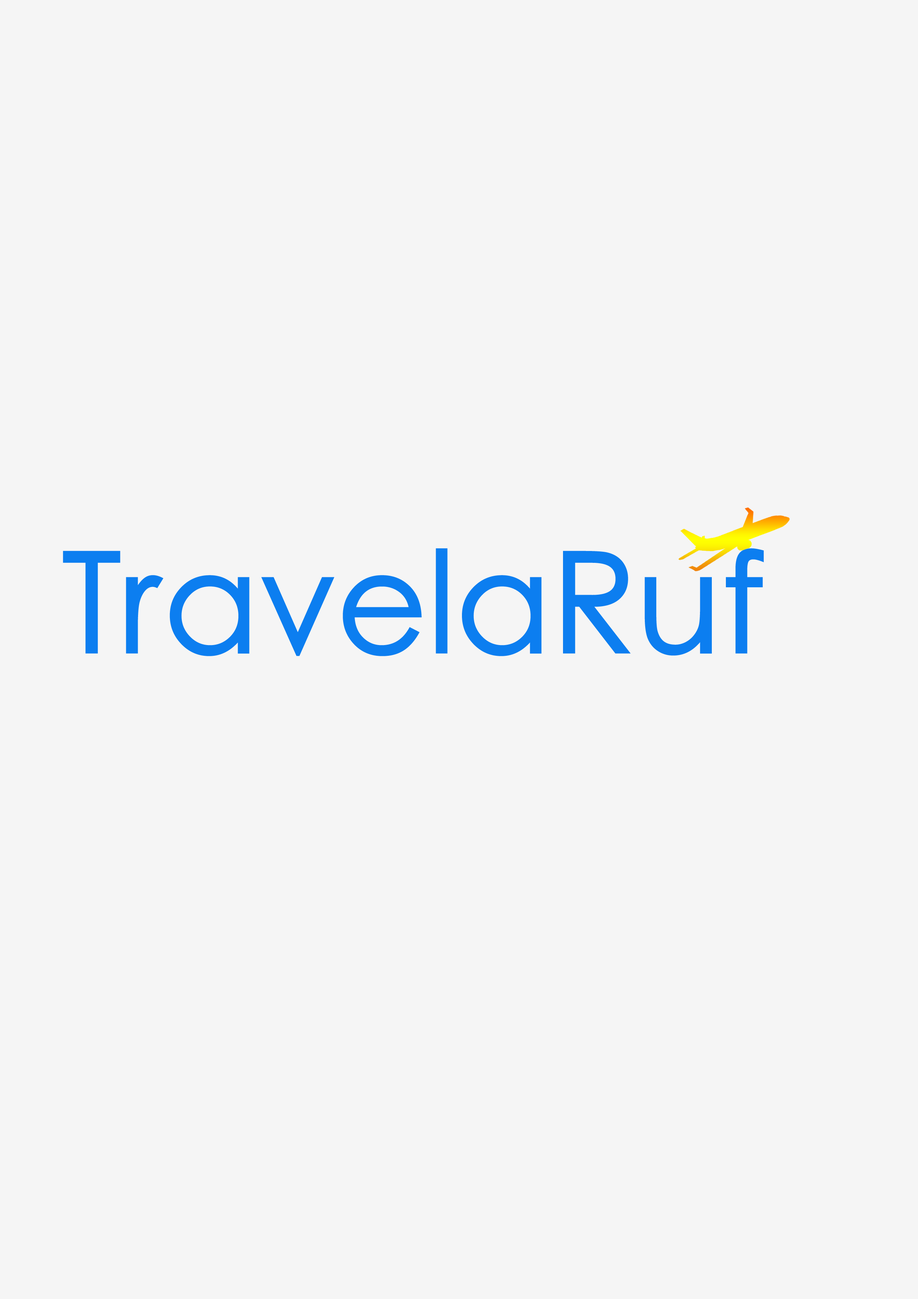
<style>
.page{position:relative;width:918px;height:1299px;background:#f5f5f5}
.page>*{position:absolute;margin:0}
.t1{font:140px "STHeitiTC-Medium";color:#0c7ef0}
</style>
<div class="page">
<p class="t1" style="left:63px;top:548px;width:701px;height:108px">TravelaRuf</p>
</div>
